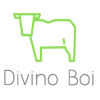
<style>
.page{position:relative;width:100px;height:100px;background:#ffffff}
.page>*{position:absolute;margin:0}
.t1{font:18.7px "AaarghNormal";color:#919191}
</style>
<div class="page">
<p class="t1" style="left:4px;top:69px;width:90px;height:17px">Divino Boi</p>
</div>
